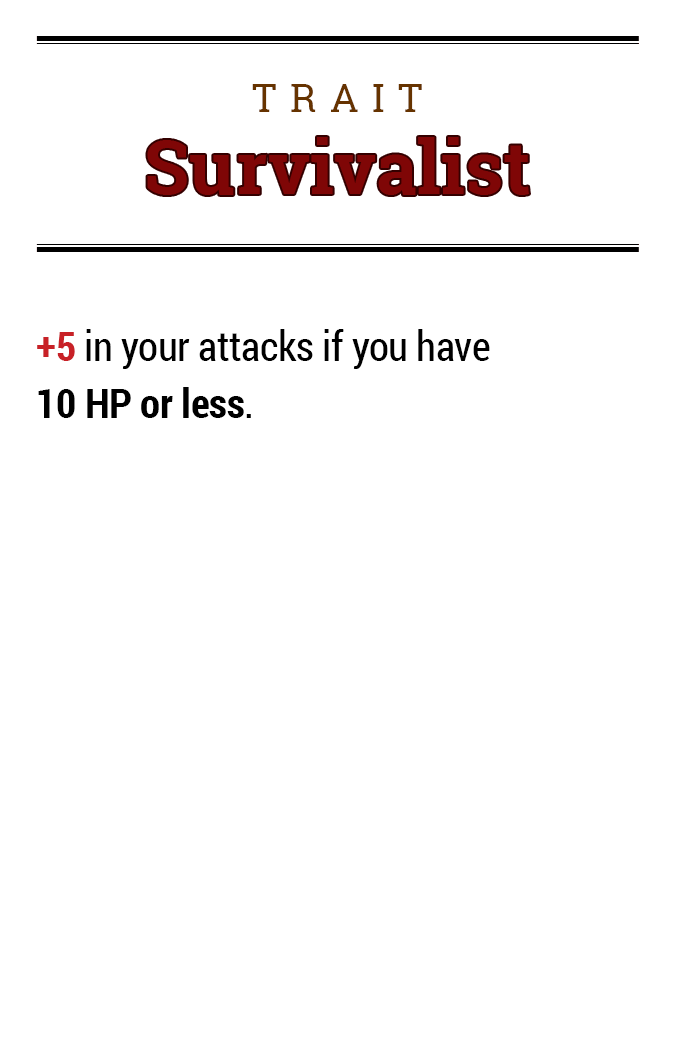
<style>
.page{position:relative;width:675px;height:1050px;background:#ffffff}
.page>*{position:absolute;margin:0}
.t1{font:39.2px "RobotoSlab-Regular";letter-spacing:0.34em;color:#663300}
.t2{font:74.5px "RobotoSlab-Bold";color:#7f0606}
.t3{font:41.1px/57.1px "RobotoCondensed-Regular";letter-spacing:-0.01em;color:#000000}
.t4{font:41.1px/57.1px "RobotoCondensed-Bold";letter-spacing:-0.01em;color:#c82127}
.t5{font:41.1px/57.1px "RobotoCondensed-Bold";letter-spacing:-0.01em;color:#000000}
</style>
<div class="page">
<p class="t1" style="left:252px;top:84px;width:170px;height:28px">TRAIT</p>
<p class="t2" style="left:147px;top:137px;width:382px;height:58px">Survivalist</p>
<p class="t3" style="left:37px;top:329px;width:453px;height:89px"><span class="t4">+5</span> in your attacks if you have<br><span class="t5">10 HP or less</span>.</p>
</div>
